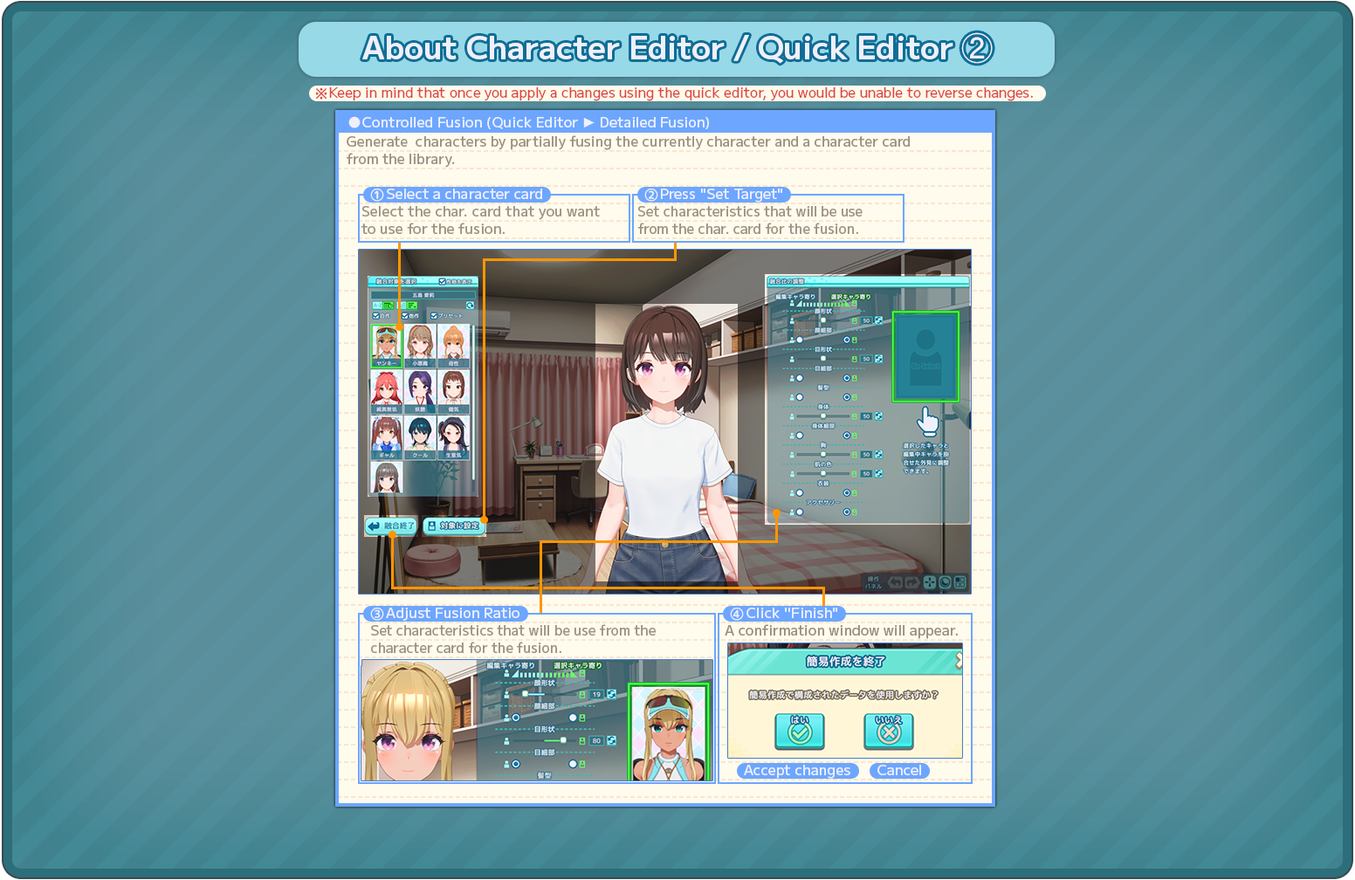
<style>
.page{position:relative;width:1355px;height:880px}
.page>*{position:absolute;margin:0}
.t1{font:31.4px "MPLUS2-SemiBold";color:#eff0fb}
.t2{font:31.4px "MS-Gothic";color:#eff0fb}
.t3{font:14px "MPLUS2-Regular";color:#de4444}
.t4{font:14px "MPLUS2-Medium";color:#eff0fb}
.t5{font:14px "TimesNewRomanPSMT";color:#eff0fb}
.t6{font:14px/14px "MPLUS2-Medium";color:#9a8f7e}
.t7{font:14px/14px "MPLUS2-Medium";color:#9c9180}
.t8{font:14px/14px "MPLUS2-Medium";color:#9c9180;scale:0.95 1}
.t9{font:10.5px "MPLUS2-Medium";color:#988d7c}
.t10{font:10.5px "MPLUS2-Medium";color:#eff0fb}
</style>
<div class="page">
<p class="t1" style="left:362px;top:32px;width:631px;height:32px">About Character Editor / Quick Editor <span class="t2">②</span></p>
<p class="t3" style="left:329px;top:87px;width:704px;height:14px">Keep in mind that once you apply a changes using the quick editor, you would be unable to reverse changes.</p>
<p class="t4" style="left:362px;top:117px;width:347px;height:12px">Controlled Fusion (Quick Editor <span class="t5">► </span>Detailed Fusion)</p>
<p class="t6" style="left:347px;top:135px;width:563px;height:33px">Generate  characters by partially fusing the currently character and a character card<br>from the library.</p>
<p class="t4" style="left:387px;top:189px;width:155px;height:10px">Select a character card</p>
<p class="t4" style="left:661px;top:189px;width:121px;height:14px">Press "Set Target"</p>
<p class="t7" style="left:361px;top:206px;width:239px;height:28px">Select the char. card that you want<br>to use for the fusion.</p>
<p class="t8" style="left:638px;top:206px;width:225px;height:28px">Set characteristics that will be use<br>from the char. card for the fusion.</p>
<p class="t4" style="left:386px;top:608px;width:133px;height:13px">Adjust Fusion Ratio</p>
<p class="t4" style="left:746px;top:608px;width:91px;height:10px">Click "Finish"</p>
<p class="t8" style="left:371px;top:624px;width:285px;height:29px">Set characteristics that will be use from the<br>character card for the fusion.</p>
<p class="t9" style="left:725px;top:624px;width:233px;height:15px">A confirmation window will appear.</p>
<p class="t10" style="left:744px;top:765px;width:106px;height:14px">Accept changes</p>
<p class="t10" style="left:877px;top:765px;width:44px;height:10px">Cancel</p>
</div>
